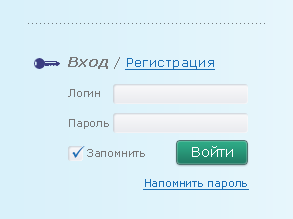
<style>
.page{position:relative;width:293px;height:219px}
.page>*{position:absolute;margin:0}
.t1{font:11px/15px "Verdana";letter-spacing:-0.02em;color:#787878}
.t2{font:14px/15px "Verdana-BoldItalic";letter-spacing:0.02em;color:#787878}
.t3{font:13px/15px "Verdana";letter-spacing:0.02em;color:#787878}
.t4{font:13px/15px "Verdana";letter-spacing:0.02em;color:#1b6fb6;text-decoration:underline}
.t5{font:14px/15px "Verdana";letter-spacing:-0.02em;color:#ffffff}
.t6{font:11px/15px "Verdana";letter-spacing:-0.02em;color:#1b6fb6;text-decoration:underline}
</style>
<div class="page">
<p class="t1" style="left:68px;top:57px;width:181px;height:133px"><span class="t2">Вход </span><span class="t3">/ </span><span class="t4">Регистрация<br><br></span>Логин<br><br>Пароль<br><br>     Запомнить            <span class="t5">Войти<br><br>                    </span><span class="t6">Напомнить пароль</span></p>
</div>
